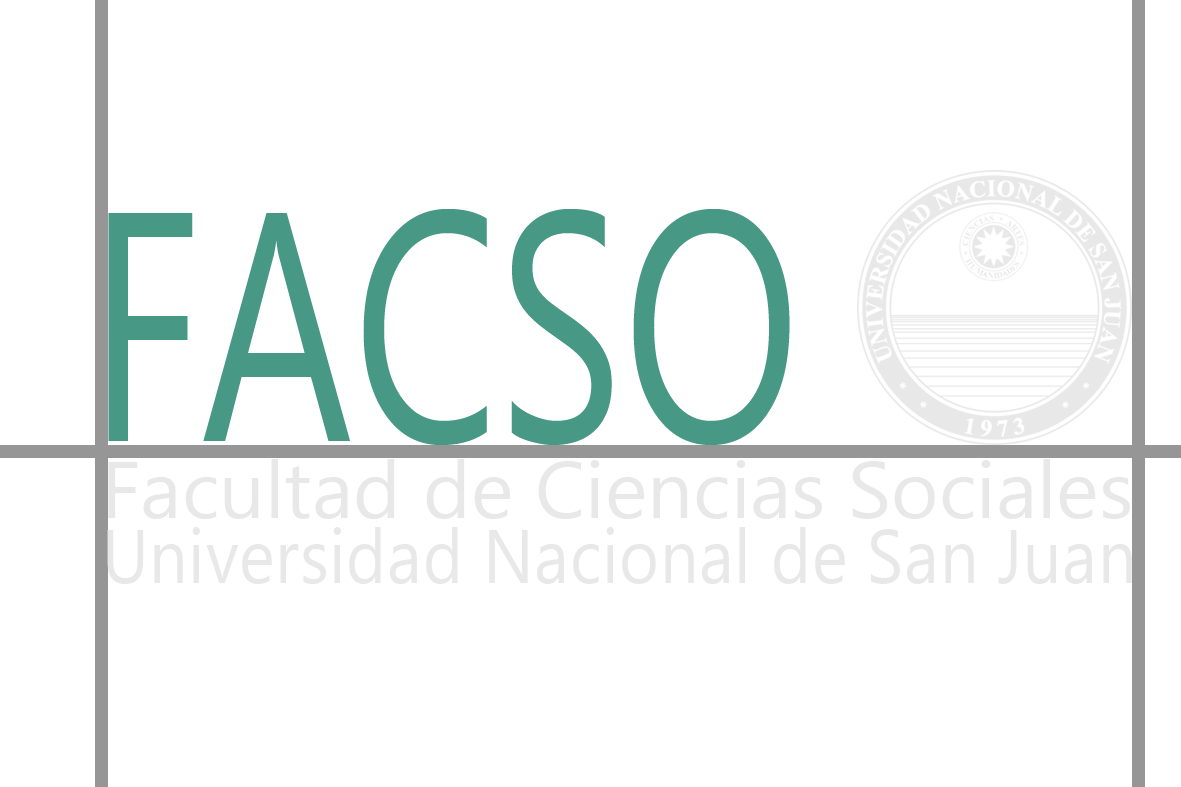
<style>
.page{position:relative;width:1181px;height:787px;background:#ffffff}
.page>*{position:absolute;margin:0}
.t1{font:325px "NirmalaUI";color:#489886;scale:0.72 1}
.t2{font:80px "NirmalaUI";color:#ebf1de}
.t3{font:75px "NirmalaUI";letter-spacing:0.011em;color:#ebf1de;scale:0.91 1}
</style>
<div class="page">
<p class="t1" style="left:108px;top:209px;width:682px;height:236px">FACSO</p>
<p class="t2" style="left:108px;top:459px;width:1022px;height:60px">Facultad de Ciencias Sociales</p>
<p class="t3" style="left:107px;top:527px;width:1025px;height:57px">Universidad Nacional de San Juan</p>
</div>
